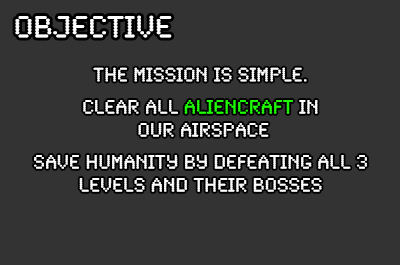
<style>
.page{position:relative;width:400px;height:265px;background:#333333}
.page>*{position:absolute;margin:0}
.t1{font:32px "SynchroLET";color:#ffffff}
.t2{font:20px/4.6px "SynchroLET";color:#ffffff}
.t3{font:20px/4.6px "SynchroLET";color:#20ff02}
</style>
<div class="page">
<p class="t1" style="left:15px;top:15px;width:157px;height:23px">OBJECTIVE</p>
<p class="t2" style="left:34px;top:67px;width:333px;height:125px;text-align:center">THE MISSION IS SIMPLE. <br><br><br><br><br><br><br>CLEAR ALL <span class="t3">ALIENCRAFT</span> IN<br><br><br><br><br> OUR AIRSPACE<br><br><br><br><br><br><br>SAVE HUMANITY BY DEFEATING all 3 <br><br><br><br><br>levels and their bosses</p>
</div>
